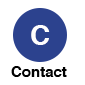
<style>
.page{position:relative;width:85px;height:85px;background:#ffffff}
.page>*{position:absolute;margin:0}
.t1{font:28px "Helvetica-Bold";color:#fffefe}
.t2{font:15px "Helvetica-Bold";color:#000000}
</style>
<div class="page">
<p class="t1" style="left:31px;top:25px;width:19px;height:20px">C</p>
<p class="t2" style="left:11px;top:66px;width:56px;height:11px">Contact</p>
</div>
